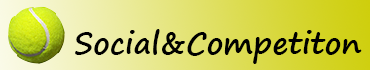
<style>
.page{position:relative;width:370px;height:70px}
.page>*{position:absolute;margin:0}
.t1{font:30px "SegoePrint-Bold";color:#000000}
</style>
<div class="page">
<p class="t1" style="left:75px;top:29px;width:287px;height:35px">Social&amp;Competiton</p>
</div>
